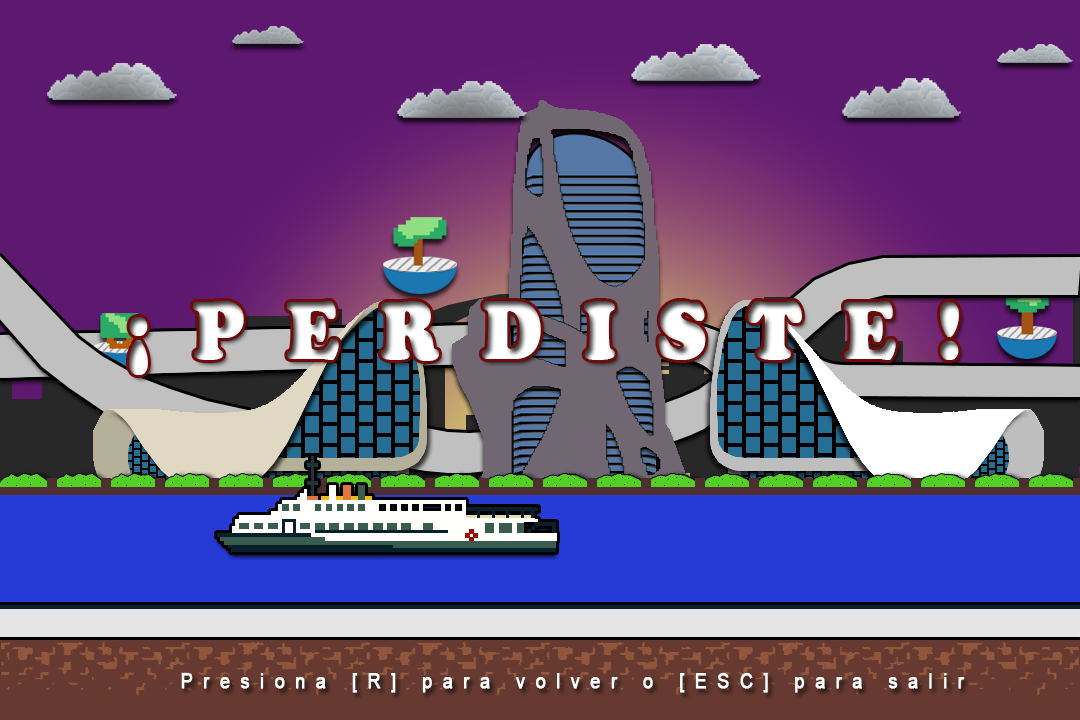
<style>
.page{position:relative;width:1080px;height:720px;background:#5d186f}
.page>*{position:absolute;margin:0}
.t1{font:83.6px "CooperBlack";letter-spacing:0.56em;color:#ffffff;font-weight:bold;scale:0.88 1}
.t2{font:20.4px "ArialMT";letter-spacing:0.56em;color:#ffffff;font-weight:bold;scale:0.88 1}
</style>
<div class="page">
<p class="t1" style="left:129px;top:301px;width:830px;height:74px">¡PERDISTE!</p>
<p class="t2" style="left:181px;top:673px;width:784px;height:20px">Presiona [R] para volver o [ESC] para salir</p>
</div>
